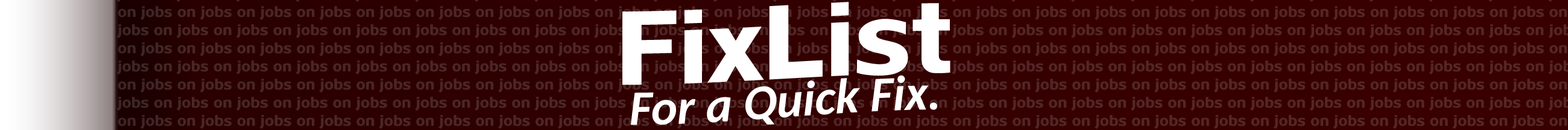
<style>
.page{position:relative;width:1568px;height:130px}
.page>*{position:absolute;margin:0}
.t1{font:102.5px "PaloAlto";color:#ffffff}
.t2{font:49.5px "Carlito-BoldItalic";color:#ffffff}
</style>
<div class="page">
<p class="t1" style="left:622px;top:2px;width:328px;height:83px">FixList</p>
<p class="t2" style="left:630px;top:75px;width:308px;height:50px">For a Quick Fix.</p>
</div>
